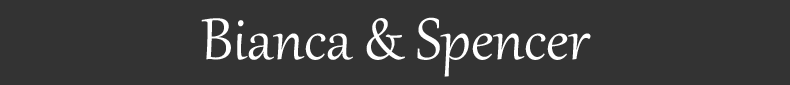
<style>
.page{position:relative;width:790px;height:85px;background:#333333}
.page>*{position:absolute;margin:0}
.t1{font:72px "Gabriola";color:#ffffff}
</style>
<div class="page">
<p class="t1" style="left:201px;top:17px;width:390px;height:60px">Bianca &amp; Spencer</p>
</div>
